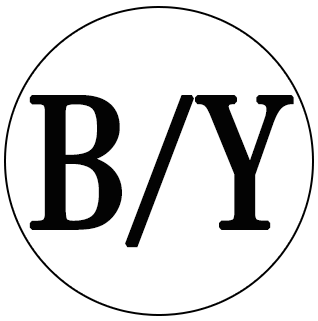
<style>
.page{position:relative;width:318px;height:321px;background:#ffffff}
.page>*{position:absolute;margin:0}
.t1{font:185.1px "Century725BT-RomanCondensed";color:#030303;text-transform:uppercase;font-weight:bold;scale:0.93 1}
</style>
<div class="page">
<p class="t1" style="left:29px;top:95px;width:265px;height:153px">B/Y</p>
</div>
